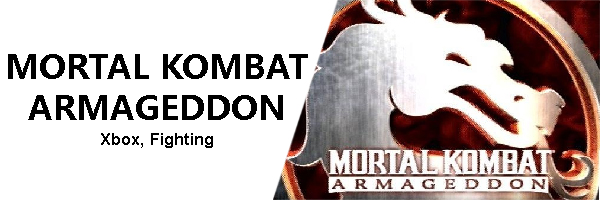
<style>
.page{position:relative;width:600px;height:200px;background:#ffffff}
.page>*{position:absolute;margin:0}
.t1{font:33.3px/41.7px "MicrosoftYaHei-Bold";color:#000000}
.t2{font:16.7px/25px "Arial-BoldMT";color:#000000}
</style>
<div class="page">
<p class="t1" style="left:8px;top:54px;width:300px;height:94px;text-align:center">MORTAL KOMBAT ARMAGEDDON<br><span class="t2">Xbox, Fighting</span></p>
</div>
